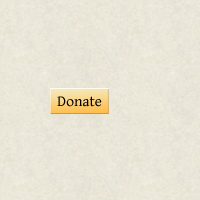
<style>
.page{position:relative;width:200px;height:200px}
.page>*{position:absolute;margin:0}
.t1{font:15px "GentiumBookBasic";letter-spacing:0.005em;color:#000000}
</style>
<div class="page">
<p class="t1" style="left:57px;top:96px;width:45px;height:11px">Donate</p>
</div>
